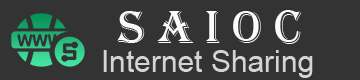
<style>
.page{position:relative;width:360px;height:80px;background:#333333}
.page>*{position:absolute;margin:0}
.t1{font:48px "Algerian";color:#f9fcf8}
.t2{font:30px "ArialMT";color:#d6d3d3}
</style>
<div class="page">
<p class="t1" style="left:117px;top:10px;width:185px;height:34px">S A I O C</p>
<p class="t2" style="left:103px;top:50px;width:210px;height:28px">Internet Sharing</p>
</div>
